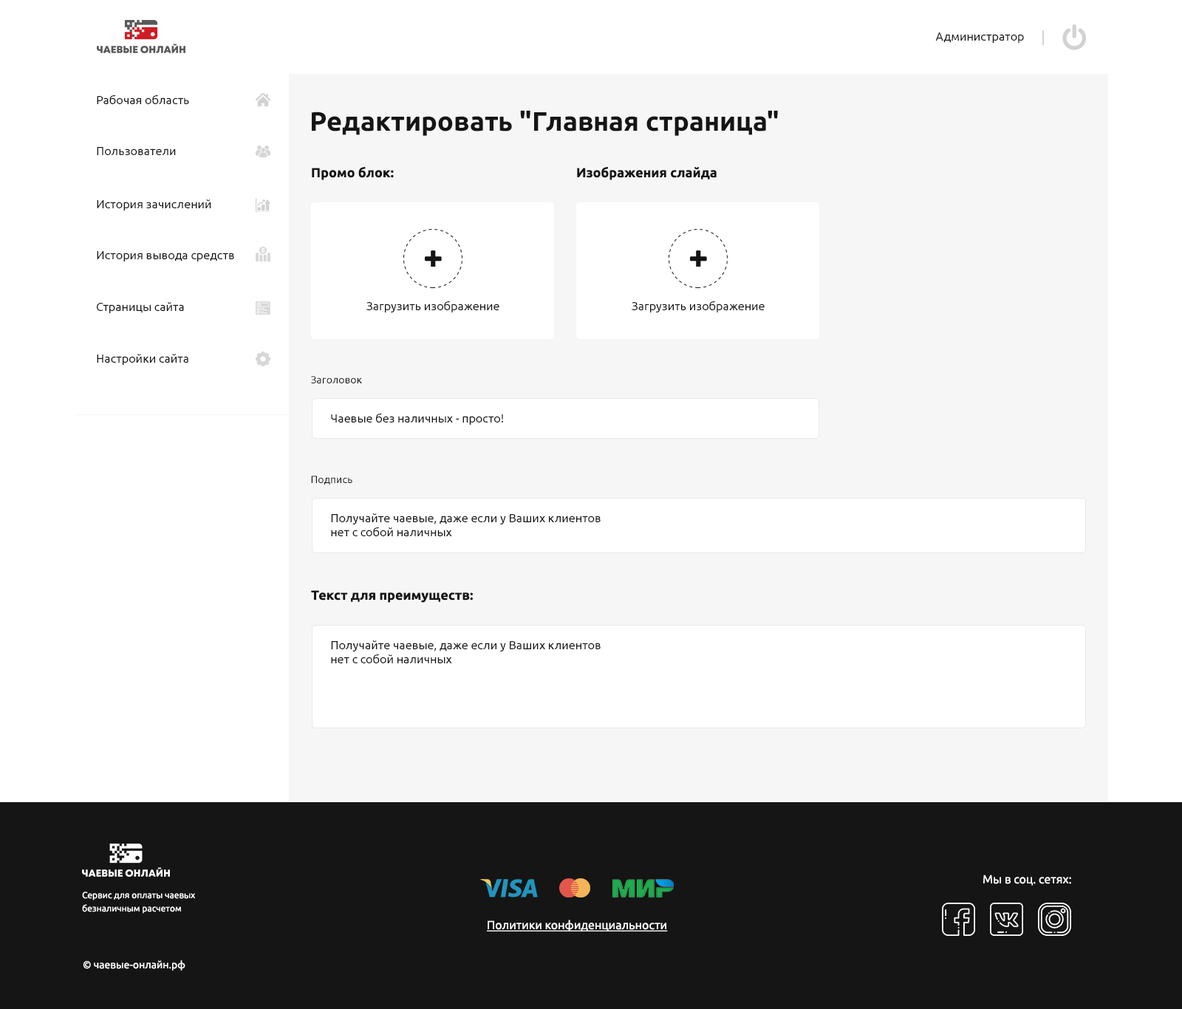
<style>
.page{position:relative;width:1182px;height:1009px;background:#ffffff}
.page>*{position:absolute;margin:0}
.t1{font:11.8px "Ubuntu-Regular";color:#151515}
.t2{font:26.6px "Ubuntu-Bold";color:#151515}
.t3{font:13.3px "Ubuntu-Bold";color:#151515}
.t4{font:10.3px "Ubuntu-Regular";color:#151515}
.t5{font:11.8px "Ubuntu-Regular";color:#ffffff}
.t6{font:8.9px/6.6px "Ubuntu-Regular";color:#ffffff}
.t7{font:11.8px "Ubuntu-Regular";color:#ffffff;text-decoration:underline}
.t8{font:10.3px "Ubuntu-Regular";color:#ffffff}
</style>
<div class="page">
<p class="t1" style="left:935px;top:33px;width:89px;height:10px">Администратор</p>
<p class="t1" style="left:97px;top:95px;width:92px;height:9px">Рабочая область</p>
<p class="t2" style="left:312px;top:110px;width:466px;height:26px">Редактировать "Главная страница"</p>
<p class="t1" style="left:97px;top:147px;width:79px;height:8px">Пользователи</p>
<p class="t3" style="left:312px;top:167px;width:82px;height:13px">Промо блок:</p>
<p class="t3" style="left:577px;top:167px;width:139px;height:13px">Изображения слайда</p>
<p class="t1" style="left:97px;top:199px;width:114px;height:12px">История зачислений</p>
<p class="t1" style="left:97px;top:251px;width:137px;height:10px">История вывода средств</p>
<p class="t1" style="left:97px;top:302px;width:87px;height:11px">Страницы сайта</p>
<p class="t1" style="left:366px;top:301px;width:133px;height:11px">Загрузить изображение</p>
<p class="t1" style="left:632px;top:301px;width:132px;height:11px">Загрузить изображение</p>
<p class="t1" style="left:97px;top:354px;width:91px;height:11px">Настройки сайта</p>
<p class="t4" style="left:311px;top:376px;width:51px;height:7px">Заголовок</p>
<p class="t1" style="left:331px;top:413px;width:172px;height:12px">Чаевые без наличных - просто!</p>
<p class="t4" style="left:311px;top:476px;width:41px;height:9px">Подпись</p>
<p class="t1" style="left:331px;top:513px;width:270px;height:23px">Получайте чаевые, даже если у Ваших клиентов<br>нет с собой наличных</p>
<p class="t3" style="left:311px;top:590px;width:162px;height:13px">Текст для преимуществ:</p>
<p class="t1" style="left:331px;top:640px;width:270px;height:23px">Получайте чаевые, даже если у Ваших клиентов<br>нет с собой наличных</p>
<p class="t5" style="left:983px;top:875px;width:88px;height:11px">Мы в соц. сетях:</p>
<p class="t6" style="left:82px;top:892px;width:114px;height:22px">Сервис для оплаты чаевых<br><br>безналичным расчетом</p>
<p class="t7" style="left:487px;top:920px;width:181px;height:11px">Политики конфиденциальности</p>
<p class="t8" style="left:83px;top:960px;width:102px;height:11px">© чаевые-онлайн.рф</p>
</div>
